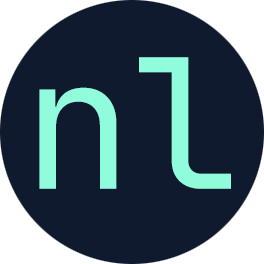
<style>
.page{position:relative;width:264px;height:264px;background:#0f1a2f}
.page>*{position:absolute;margin:0}
.t1{font:180px "JetBrainsMono-Regular";color:#90fcdc}
</style>
<div class="page">
<p class="t1" style="left:39px;top:57px;width:192px;height:132px">nl</p>
</div>
